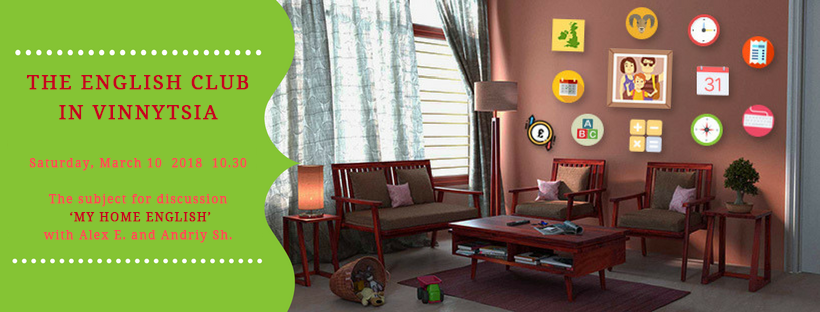
<style>
.page{position:relative;width:820px;height:312px;background:#85c434}
.page>*{position:absolute;margin:0}
.t1{font:12px/18px "NotoSerif";letter-spacing:0.075em;color:#ff4853;font-weight:bold}
.t2{font:20px/30px "NotoSerif";letter-spacing:0.075em;color:#c6031f;font-weight:bold}
.t3{font:12px/18px "NotoSerif";letter-spacing:0.075em;color:#c6031f;font-weight:bold}
</style>
<div class="page">
<p class="t1" style="left:26px;top:75px;width:223px;height:168px;text-align:center"><span class="t2"><br>THE ENGLISH CLUB IN VINNYTSIA<br><br></span>Saturday, March 10  2018  10.30<br><br>The subject for discussion<br><span class="t3"> ‘MY HOME ENGLISH’<br></span>with Alex E. and Andriy Sh.</p>
</div>
